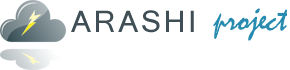
<style>
.page{position:relative;width:290px;height:70px;background:#ffffff}
.page>*{position:absolute;margin:0}
.t1{font:28.8px "Mangal";letter-spacing:0.1em;color:#404f55}
.t2{font:36px "Mistral";letter-spacing:-0.02em;color:#278baf}
</style>
<div class="page">
<p class="t1" style="left:71px;top:10px;width:123px;height:23px">ARASHI</p>
<p class="t2" style="left:213px;top:8px;width:74px;height:33px">project</p>
</div>
